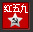
<style>
.page{position:relative;width:33px;height:32px;background:#c50000}
.page>*{position:absolute;margin:0}
.t1{font:10.4px "SimSun";letter-spacing:-0.25em;color:#ffffff}
</style>
<div class="page">
<p class="t1" style="left:4px;top:4px;width:24px;height:9px">红五九</p>
</div>
